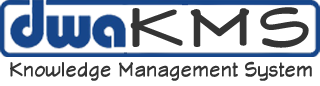
<style>
.page{position:relative;width:320px;height:86px;background:#ffffff}
.page>*{position:absolute;margin:0}
.t1{font:54.5px "ChiefBlueprint";letter-spacing:0.02em;color:#343434;scale:1.55 1}
.t2{font:20px "ChiefBlueprint";letter-spacing:0.02em;color:#343434}
</style>
<div class="page">
<p class="t1" style="left:130px;top:7px;width:179px;height:41px">KMS</p>
<p class="t2" style="left:10px;top:61px;width:302px;height:20px">Knowledge Management System</p>
</div>
